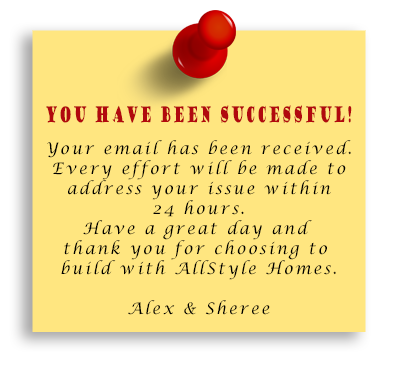
<style>
.page{position:relative;width:400px;height:370px;background:#ffe680}
.page>*{position:absolute;margin:0}
.t1{font:21.3px "GoudyStout";letter-spacing:0.15em;color:#b1090e;scale:0.48 1}
.t2{font:15.9px/20px "LucidaCalligraphy-Italic";letter-spacing:0.15em;color:#000000}
</style>
<div class="page">
<p class="t1" style="left:46px;top:105px;width:306px;height:18px">You Have Been Successful!</p>
<p class="t2" style="left:47px;top:140px;width:304px;height:175px;text-align:center">Your email has been received.<br>Every effort will be made to<br>address your issue within<br>24 hours.<br>Have a great day and <br>thank you for choosing to <br>build with AllStyle Homes.<br><br>Alex &amp; Sheree</p>
</div>
